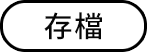
<style>
.page{position:relative;width:147px;height:52px;background:#ffffff}
.page>*{position:absolute;margin:0}
.t1{font:29.2px "NotoSansCJKtc-Medium";letter-spacing:0.06em;color:#060606}
</style>
<div class="page">
<p class="t1" style="left:44px;top:12px;width:58px;height:28px">存檔</p>
</div>
